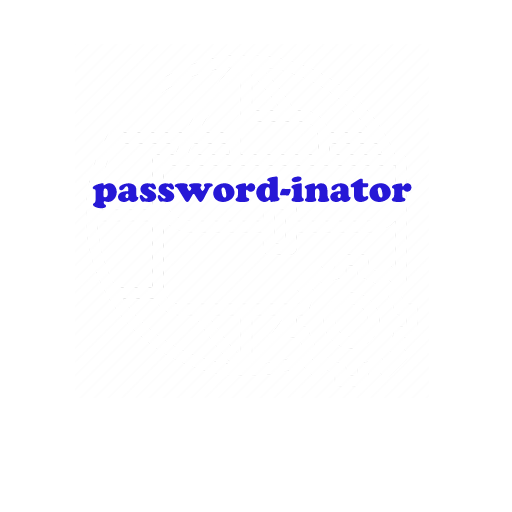
<style>
.page{position:relative;width:512px;height:512px;background:#ffffff}
.page>*{position:absolute;margin:0}
.t1{font:35.8px "CooperBlackStd";color:#2618d6}
</style>
<div class="page">
<p class="t1" style="left:92px;top:176px;width:320px;height:33px">password-inator</p>
</div>
